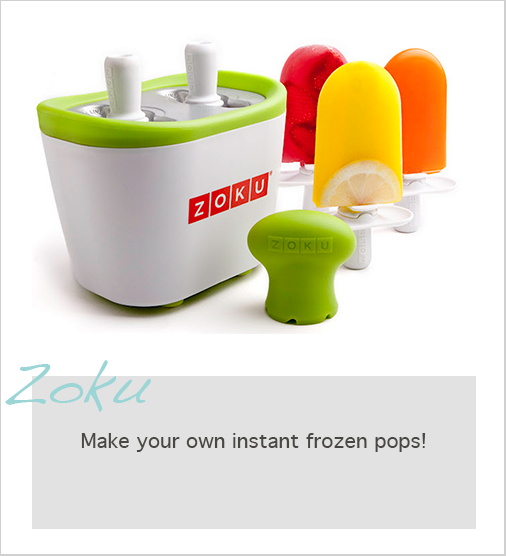
<style>
.page{position:relative;width:506px;height:556px;background:#ffffff}
.page>*{position:absolute;margin:0}
.t1{font:56px "Handwriting-Dakota";color:#9bd5d5}
.t2{font:20px "Geneva";color:#484743}
</style>
<div class="page">
<p class="t1" style="left:5px;top:360px;width:146px;height:52px">Zoku</p>
<p class="t2" style="left:81px;top:433px;width:345px;height:19px">Make your own instant frozen pops!</p>
</div>
